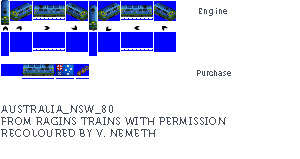
<style>
.page{position:relative;width:300px;height:159px;background:#ffffff}
.page>*{position:absolute;margin:0}
.t1{font:8px "Museo700-Regular";letter-spacing:0.075em;color:#444c5c}
.t2{font:8px "Museo700-Regular";color:#444c5c}
.t3{font:10px "Museo700-Regular";letter-spacing:0.075em;color:#444c5c;text-transform:uppercase}
</style>
<div class="page">
<p class="t1" style="left:199px;top:8px;width:28px;height:8px">Engine</p>
<p class="t2" style="left:197px;top:70px;width:34px;height:6px">Purchase</p>
<p class="t3" style="left:1px;top:105px;width:225px;height:32px">Australia_NSW_80<br>From ragins trains with permission<br>RECOLOURED BY v. nemeth</p>
</div>
